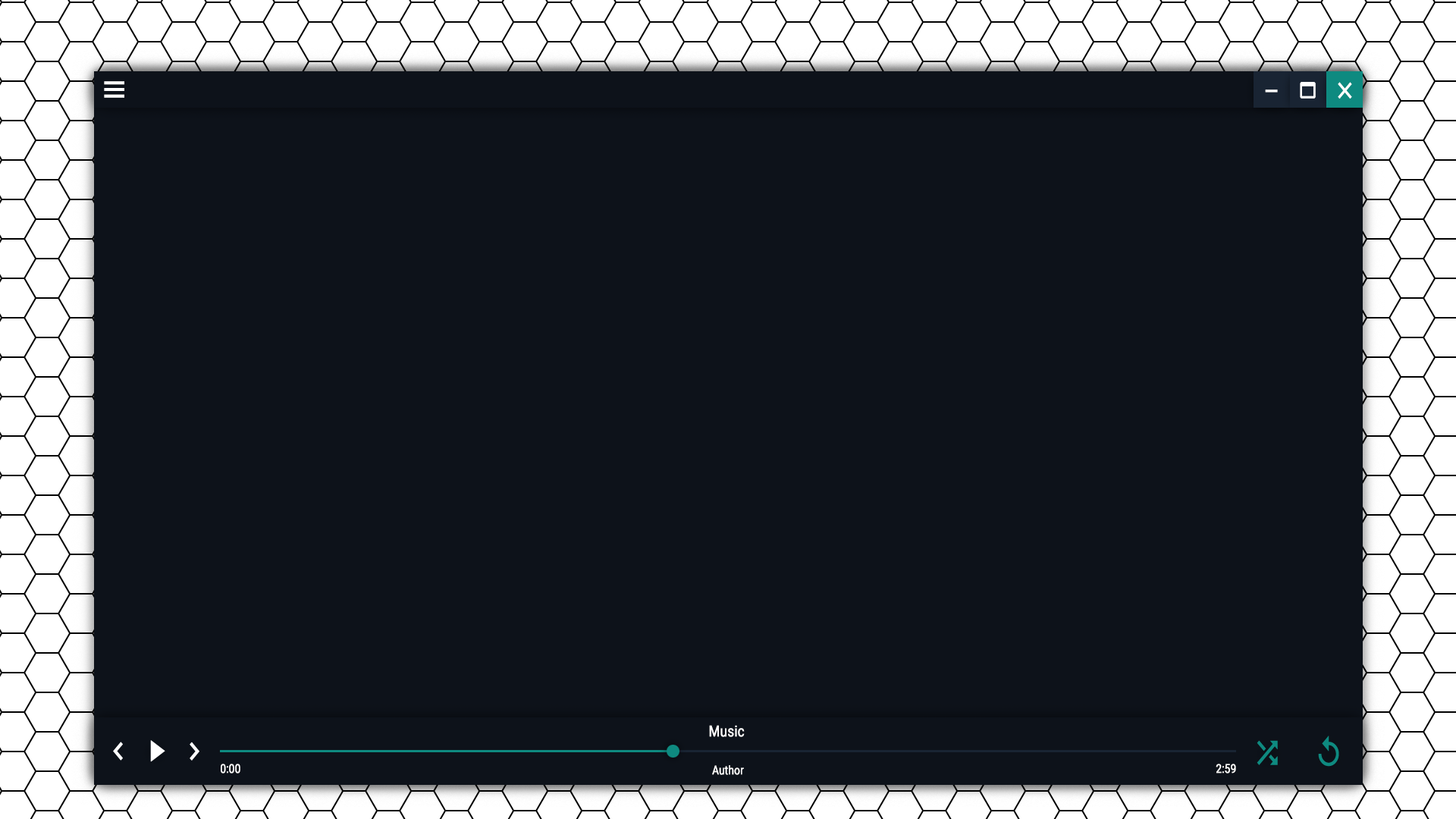
<style>
.page{position:relative;width:1456px;height:819px;background:#0d121a}
.page>*{position:absolute;margin:0}
.t1{font:15.2px "Roboto-Regular";color:#ffffff;font-weight:bold;scale:0.83 1}
.t2{font:12.1px "Roboto-Regular";color:#ffffff;font-weight:bold;scale:0.83 1}
</style>
<div class="page">
<p class="t1" style="left:709px;top:725px;width:36px;height:12px">Music</p>
<p class="t2" style="left:221px;top:764px;width:19px;height:9px">0:00</p>
<p class="t2" style="left:712px;top:765px;width:32px;height:10px">Author</p>
<p class="t2" style="left:1216px;top:764px;width:20px;height:9px">2:59</p>
</div>
